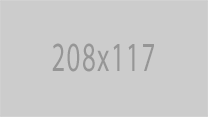
<style>
.page{position:relative;width:208px;height:117px;background:#cccccc}
.page>*{position:absolute;margin:0}
.t1{font:41.7px "MyriadPro-Regular";letter-spacing:0.07em;color:#969696;scale:0.64 1}
</style>
<div class="page">
<p class="t1" style="left:52px;top:43px;width:102px;height:29px">208x117</p>
</div>
